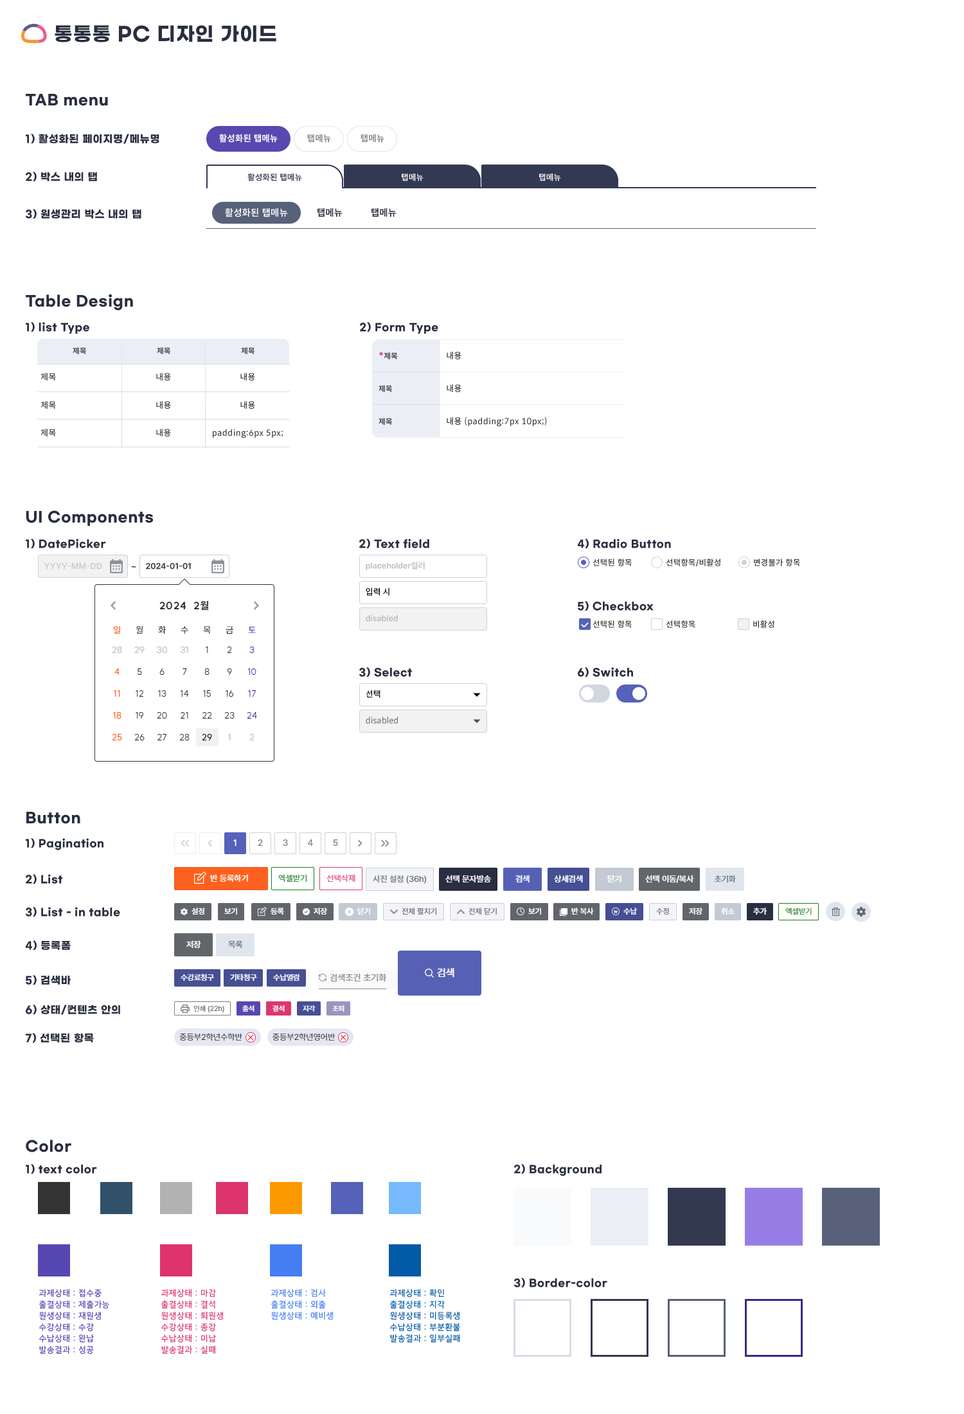
<style>
.page{position:relative;width:964px;height:1414px;background:#ffffff}
.page>*{position:absolute;margin:0}
.t1{font:19.3px "GmarketSansTTFBold";letter-spacing:0.04em;color:#292e40}
.t2{font:14.1px "GmarketSansTTFBold";letter-spacing:0.04em;color:#292e40}
.t3{font:10.3px "GmarketSansTTFBold";letter-spacing:0.04em;color:#292e40}
.t4{font:9px "Pretendard-Bold";letter-spacing:0.04em;color:#ffffff}
.t5{font:9px "Pretendard-SemiBold";letter-spacing:0.04em;color:#828282}
.t6{font:8.4px "Pretendard-SemiBold";letter-spacing:0.04em;color:#333952}
.t7{font:8.4px "Pretendard-SemiBold";letter-spacing:0.04em;color:#ffffff}
.t8{font:9.6px "Pretendard-SemiBold";letter-spacing:0.04em;color:#ffffff}
.t9{font:9.6px "Pretendard-SemiBold";letter-spacing:0.04em;color:#292e41}
.t10{font:7.7px "Pretendard-SemiBold";letter-spacing:0.04em;color:#333333}
.t11{font:9.6px "Pretendard-SemiBold";letter-spacing:0.04em;color:#dd346d}
.t12{font:8.4px "SpoqaHanSans-Regular";letter-spacing:0.04em;color:#333333}
.t13{font:8.4px "Pretendard-SemiBold";letter-spacing:0.04em;color:#cccccc}
.t14{font:9px "Pretendard-SemiBold";color:#333333}
.t15{font:8.4px "Pretendard-SemiBold";color:#333333}
.t16{font:8.4px "Pretendard-SemiBold";color:#bcbcbc}
.t17{font:8.4px "Pretendard-Medium";letter-spacing:0.04em;color:#333333}
.t18{font:8.4px "SpoqaHanSans-Regular";color:#000000}
.t19{font:8.4px "SpoqaHanSans-Regular";color:#707070}
.t20{font:9px "Pretendard-Medium";letter-spacing:0.04em;color:#ffffff;font-weight:bold}
.t21{font:9px "Pretendard-Medium";letter-spacing:0.04em;color:#7e7e7e}
.t22{font:8.4px/11.6px "NanumSquareB";letter-spacing:0.04em;color:#5647b3}
.t23{font:8.4px/11.6px "NanumSquareB";letter-spacing:0.04em;color:#dd346d}
.t24{font:8.4px/11.6px "NanumSquareB";letter-spacing:0.04em;color:#447ef2}
.t25{font:8.4px/11.6px "NanumSquareB";letter-spacing:0.04em;color:#035aa6}
</style>
<div class="page">
<p class="t1" style="left:55px;top:25px;width:221px;height:17px">통통통 PC 디자인 가이드</p>
<p class="t2" style="left:26px;top:94px;width:82px;height:12px">TAB menu</p>
<p class="t3" style="left:26px;top:134px;width:133px;height:10px">1) 활성화된 페이지명/메뉴명</p>
<p class="t4" style="left:219px;top:134px;width:59px;height:9px">활성화된 탭메뉴</p>
<p class="t5" style="left:307px;top:134px;width:24px;height:9px">탭메뉴</p>
<p class="t5" style="left:361px;top:134px;width:23px;height:9px">탭메뉴</p>
<p class="t3" style="left:26px;top:172px;width:71px;height:9px">2) 박스 내의 탭</p>
<p class="t6" style="left:248px;top:173px;width:54px;height:8px">활성화된 탭메뉴</p>
<p class="t7" style="left:402px;top:174px;width:22px;height:7px">탭메뉴</p>
<p class="t7" style="left:539px;top:174px;width:22px;height:7px">탭메뉴</p>
<p class="t3" style="left:26px;top:209px;width:115px;height:10px">3) 원생관리 박스 내의 탭</p>
<p class="t8" style="left:225px;top:208px;width:63px;height:9px">활성화된 탭메뉴</p>
<p class="t9" style="left:318px;top:208px;width:25px;height:9px">탭메뉴</p>
<p class="t9" style="left:372px;top:208px;width:25px;height:9px">탭메뉴</p>
<p class="t2" style="left:26px;top:294px;width:107px;height:16px">Table Design</p>
<p class="t3" style="left:26px;top:322px;width:63px;height:12px">1) list Type</p>
<p class="t3" style="left:360px;top:322px;width:78px;height:12px">2) Form Type</p>
<p class="t10" style="left:73px;top:347px;width:13px;height:7px">제목</p>
<p class="t10" style="left:157px;top:347px;width:13px;height:7px">제목</p>
<p class="t10" style="left:241px;top:347px;width:14px;height:7px">제목</p>
<p class="t10" style="left:379px;top:352px;width:19px;height:7px"><span class="t11">*</span>제목</p>
<p class="t12" style="left:447px;top:352px;width:15px;height:7px">내용</p>
<p class="t12" style="left:40px;top:373px;width:16px;height:8px">제목</p>
<p class="t12" style="left:156px;top:373px;width:15px;height:8px">내용</p>
<p class="t12" style="left:240px;top:373px;width:15px;height:8px">내용</p>
<p class="t10" style="left:379px;top:385px;width:13px;height:7px">제목</p>
<p class="t12" style="left:447px;top:384px;width:15px;height:8px">내용</p>
<p class="t12" style="left:40px;top:401px;width:16px;height:8px">제목</p>
<p class="t12" style="left:156px;top:401px;width:15px;height:8px">내용</p>
<p class="t12" style="left:240px;top:401px;width:15px;height:8px">내용</p>
<p class="t10" style="left:379px;top:418px;width:13px;height:7px">제목</p>
<p class="t12" style="left:447px;top:417px;width:100px;height:10px">내용 (padding:7px 10px;)</p>
<p class="t12" style="left:40px;top:429px;width:16px;height:8px">제목</p>
<p class="t12" style="left:156px;top:429px;width:15px;height:8px">내용</p>
<p class="t12" style="left:213px;top:429px;width:70px;height:9px">padding:6px 5px;</p>
<p class="t2" style="left:26px;top:510px;width:127px;height:16px">UI Components</p>
<p class="t3" style="left:26px;top:539px;width:80px;height:9px">1) DatePicker</p>
<p class="t3" style="left:359px;top:539px;width:70px;height:9px">2) Text field</p>
<p class="t3" style="left:578px;top:539px;width:93px;height:9px">4) Radio Button</p>
<p class="t13" style="left:44px;top:563px;width:58px;height:7px">YYYY-MM-DD</p>
<p class="t14" style="left:131px;top:566px;width:5px;height:2px">~</p>
<p class="t15" style="left:146px;top:563px;width:45px;height:7px">2024-01-01</p>
<p class="t16" style="left:366px;top:562px;width:59px;height:8px">placeholder컬러</p>
<p class="t17" style="left:593px;top:559px;width:39px;height:7px">선택된 항목</p>
<p class="t17" style="left:666px;top:559px;width:55px;height:8px">선택항목/비활성</p>
<p class="t17" style="left:754px;top:559px;width:46px;height:7px">변경불가 항목</p>
<p class="t18" style="left:366px;top:588px;width:24px;height:8px">입력 시</p>
<p class="t3" style="left:578px;top:601px;width:76px;height:10px">5) Checkbox</p>
<p class="t16" style="left:366px;top:615px;width:32px;height:7px">disabled</p>
<p class="t17" style="left:593px;top:620px;width:39px;height:8px">선택된 항목</p>
<p class="t17" style="left:666px;top:620px;width:30px;height:8px">선택항목</p>
<p class="t17" style="left:753px;top:620px;width:22px;height:8px">비활성</p>
<p class="t3" style="left:359px;top:667px;width:53px;height:10px">3) Select</p>
<p class="t3" style="left:578px;top:667px;width:55px;height:10px">6) Switch</p>
<p class="t18" style="left:366px;top:690px;width:15px;height:8px">선택</p>
<p class="t19" style="left:366px;top:717px;width:32px;height:7px">disabled</p>
<p class="t2" style="left:26px;top:812px;width:54px;height:12px">Button</p>
<p class="t3" style="left:26px;top:838px;width:78px;height:13px">1) Pagination</p>
<p class="t20" style="left:233px;top:840px;width:4px;height:7px">1</p>
<p class="t21" style="left:258px;top:840px;width:5px;height:6px">2</p>
<p class="t21" style="left:283px;top:840px;width:5px;height:7px">3</p>
<p class="t21" style="left:308px;top:840px;width:5px;height:6px">4</p>
<p class="t21" style="left:333px;top:840px;width:5px;height:7px">5</p>
<p class="t3" style="left:26px;top:874px;width:36px;height:10px">2) List</p>
<p class="t3" style="left:26px;top:907px;width:94px;height:10px">3) List - in table</p>
<p class="t3" style="left:26px;top:941px;width:45px;height:9px">4) 등록폼</p>
<p class="t3" style="left:26px;top:975px;width:45px;height:10px">5) 검색바</p>
<p class="t3" style="left:26px;top:1005px;width:94px;height:10px">6) 상태/컨텐츠 안의</p>
<p class="t3" style="left:26px;top:1033px;width:68px;height:10px">7) 선택된 항목</p>
<p class="t2" style="left:26px;top:1140px;width:45px;height:13px">Color</p>
<p class="t3" style="left:26px;top:1164px;width:71px;height:10px">1) text color</p>
<p class="t3" style="left:514px;top:1164px;width:88px;height:12px">2) Background</p>
<p class="t3" style="left:514px;top:1278px;width:94px;height:10px">3) Border-color</p>
<p class="t22" style="left:39px;top:1289px;width:70px;height:65px">과제상태 : 접수중<br>출결상태 : 제출가능<br>원생상태 : 재원생<br>수강상태 : 수강<br>수납상태 : 완납<br>발송결과 : 성공</p>
<p class="t23" style="left:161px;top:1289px;width:62px;height:65px">과제상태 : 마감<br>출결상태 : 결석<br>원생상태 : 퇴원생<br>수강상태 : 종강<br>수납상태 : 미납<br>발송결과 : 실패</p>
<p class="t24" style="left:271px;top:1289px;width:62px;height:31px">과제상태 : 검사<br>출결상태 : 외출<br>원생상태 : 예비생</p>
<p class="t25" style="left:390px;top:1289px;width:70px;height:54px">과제상태 : 확인<br>출결상태 : 지각<br>원생상태 : 미등록생<br>수납상태 : 부분환불<br>발송결과 : 일부실패</p>
</div>
